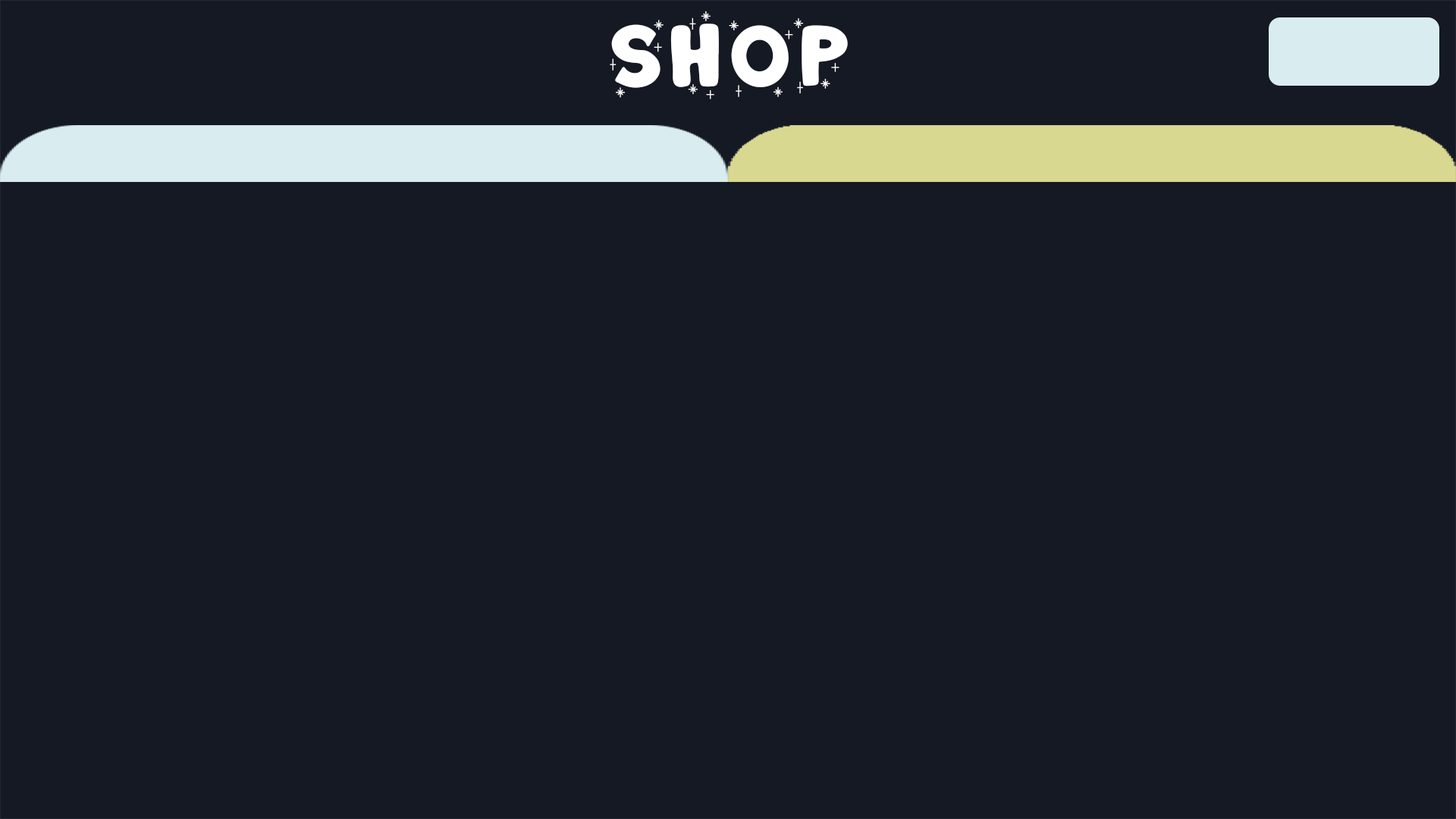
<style>
.page{position:relative;width:1456px;height:819px;background:#141923}
.page>*{position:absolute;margin:0}
.t1{font:79.6px "WinterDairy-Shiny";color:#ffffff}
</style>
<div class="page">
<p class="t1" style="left:610px;top:11px;width:238px;height:88px">SHOP</p>
</div>
